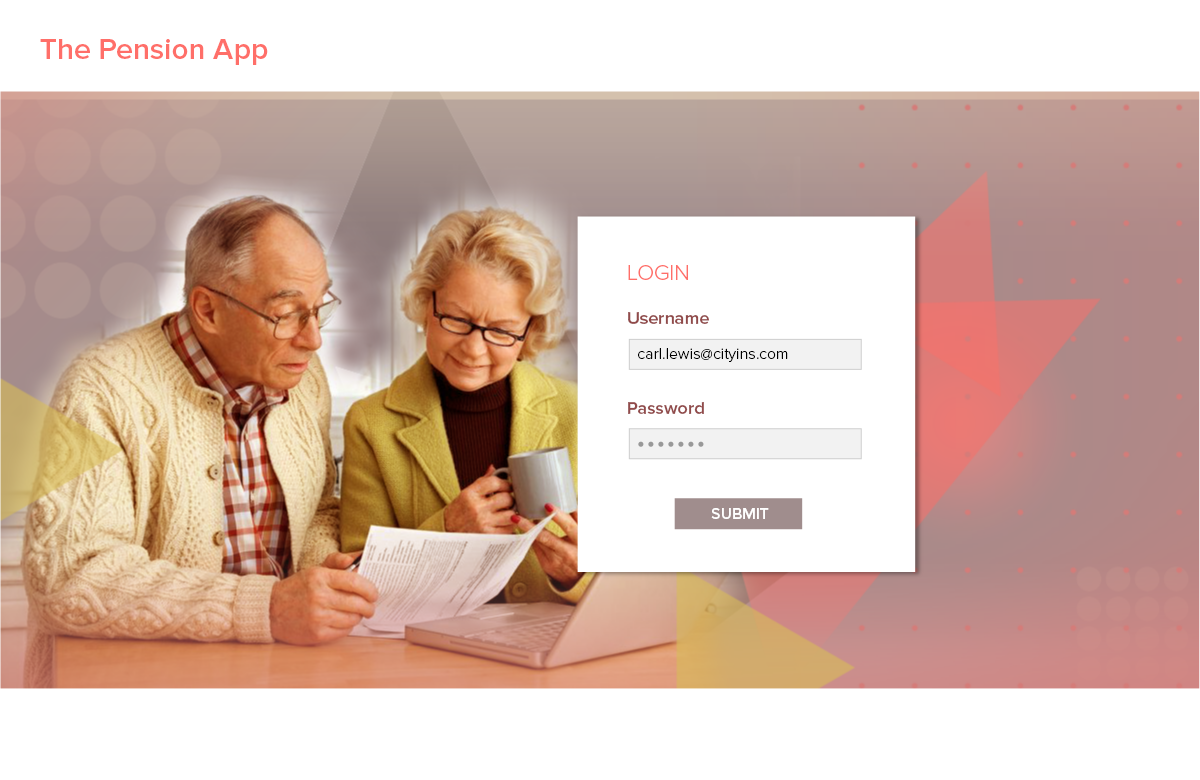
<style>
.page{position:relative;width:1200px;height:780px;background:#ffffff}
.page>*{position:absolute;margin:0}
.t1{font:30px "ProximaNova-Semibold";color:#ff6f69}
.t2{font:22px "ProximaNova-Light";color:#ff6f69}
.t3{font:18px "ProximaNova-Semibold";color:#914a4a}
.t4{font:16px "ProximaNova-Light";color:#000000}
.t5{font:16px "ProximaNova-Semibold";color:#ffffff}
</style>
<div class="page">
<p class="t1" style="left:40px;top:39px;width:228px;height:26px">The Pension App</p>
<p class="t2" style="left:628px;top:265px;width:60px;height:15px">LOGIN</p>
<p class="t3" style="left:628px;top:312px;width:81px;height:12px">Username</p>
<p class="t4" style="left:638px;top:348px;width:150px;height:14px">carl.lewis@cityins.com</p>
<p class="t3" style="left:628px;top:402px;width:76px;height:12px">Password</p>
<p class="t5" style="left:711px;top:508px;width:58px;height:11px">SUBMIT</p>
</div>
